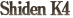
<style>
.page{position:relative;width:73px;height:18px;background:#ffffff}
.page>*{position:absolute;margin:0}
.t1{font:18px "RyuminPro-ExBold";letter-spacing:-0.08em;color:#4a3f32;font-weight:bold;scale:0.9 1}
</style>
<div class="page">
<p class="t1" style="left:0px;top:1px;width:70px;height:15px">Shiden K4</p>
</div>
